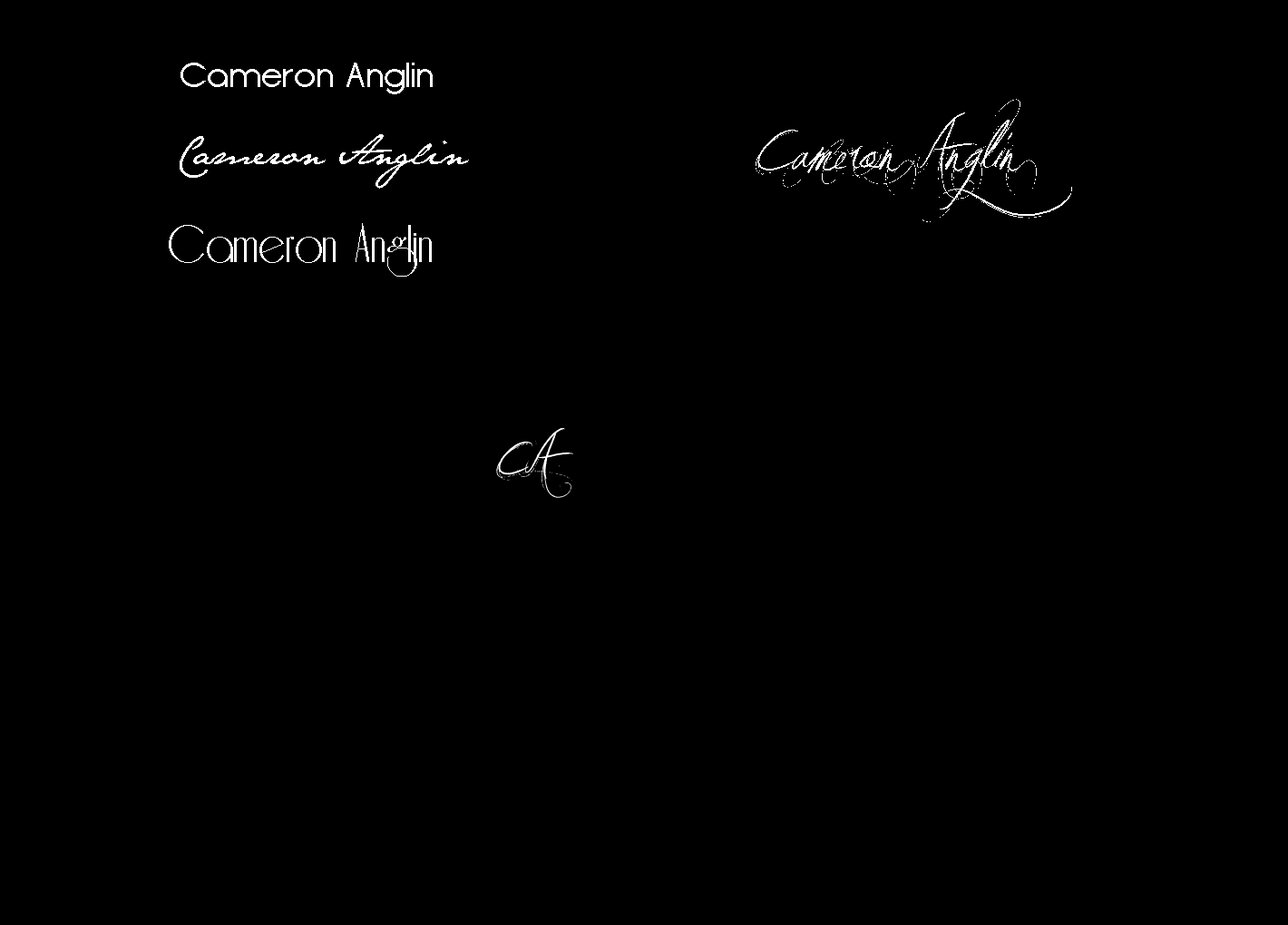
<style>
.page{position:relative;width:1288px;height:925px;background:#000000}
.page>*{position:absolute;margin:0}
.t1{font:35.3px "Opificio";color:#ffffff}
.t2{font:75.6px "JellykaVampireStreet";color:#ffffff}
.t3{font:60.5px "JellykaVampireStreet";color:#ffffff}
.t4{font:35.3px "JaneAusten";color:#ffffff}
.t5{font:60.5px "Riesling";color:#ffffff}
</style>
<div class="page">
<p class="t1" style="left:181px;top:63px;width:252px;height:31px">Cameron Anglin</p>
<p class="t2" style="left:756px;top:99px;width:316px;height:123px">Cameron Anglin<br><span class="t3"><br>c</span></p>
<p class="t4" style="left:180px;top:134px;width:289px;height:55px">Cameron Anglin</p>
<p class="t5" style="left:169px;top:223px;width:263px;height:54px">Cameron Anglin</p>
<p class="t3" style="left:496px;top:428px;width:77px;height:70px">CA</p>
</div>
